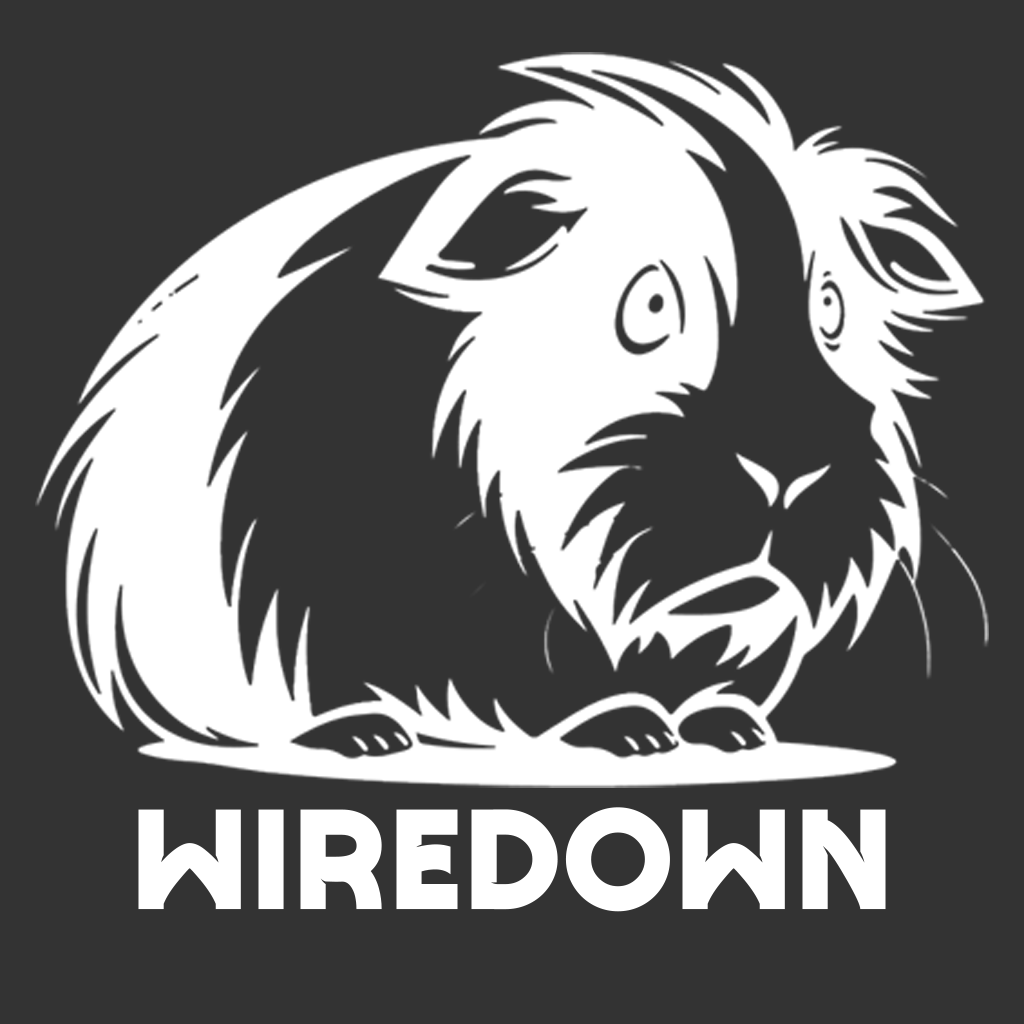
<style>
.page{position:relative;width:1024px;height:1024px;background:#333333}
.page>*{position:absolute;margin:0}
.t1{font:142.1px "GohanRegular";color:#ffffff}
</style>
<div class="page">
<p class="t1" style="left:138px;top:807px;width:748px;height:105px">WireDown</p>
</div>
